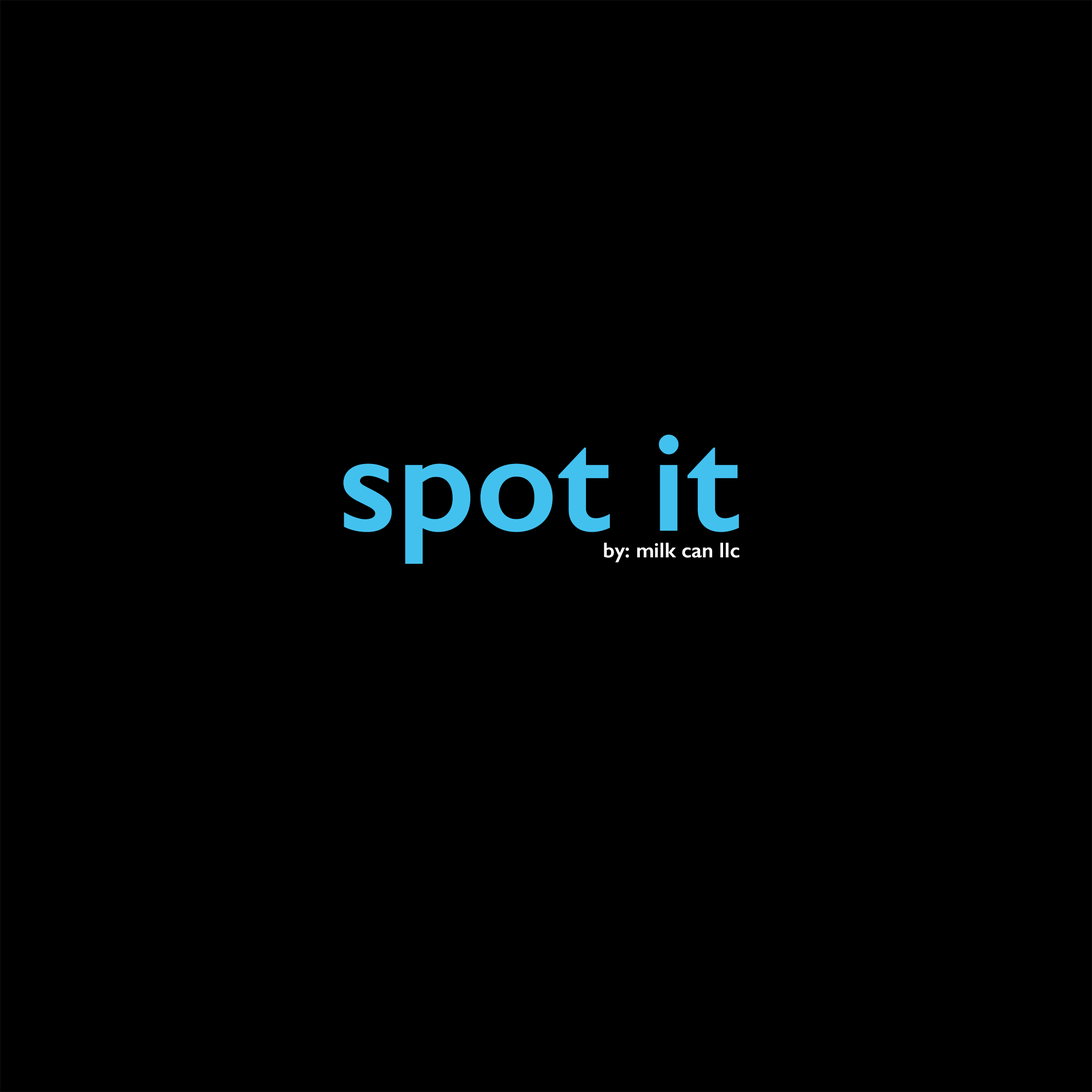
<style>
.page{position:relative;width:1092px;height:1092px;background:#000000}
.page>*{position:absolute;margin:0}
.t1{font:144px "GillSans-SemiBold";color:#43c1ee}
.t2{font:21.3px "GillSans-SemiBold";color:#ffffff}
</style>
<div class="page">
<p class="t1" style="left:343px;top:434px;width:396px;height:130px">spot it</p>
<p class="t2" style="left:604px;top:543px;width:135px;height:19px">by: milk can llc</p>
</div>
